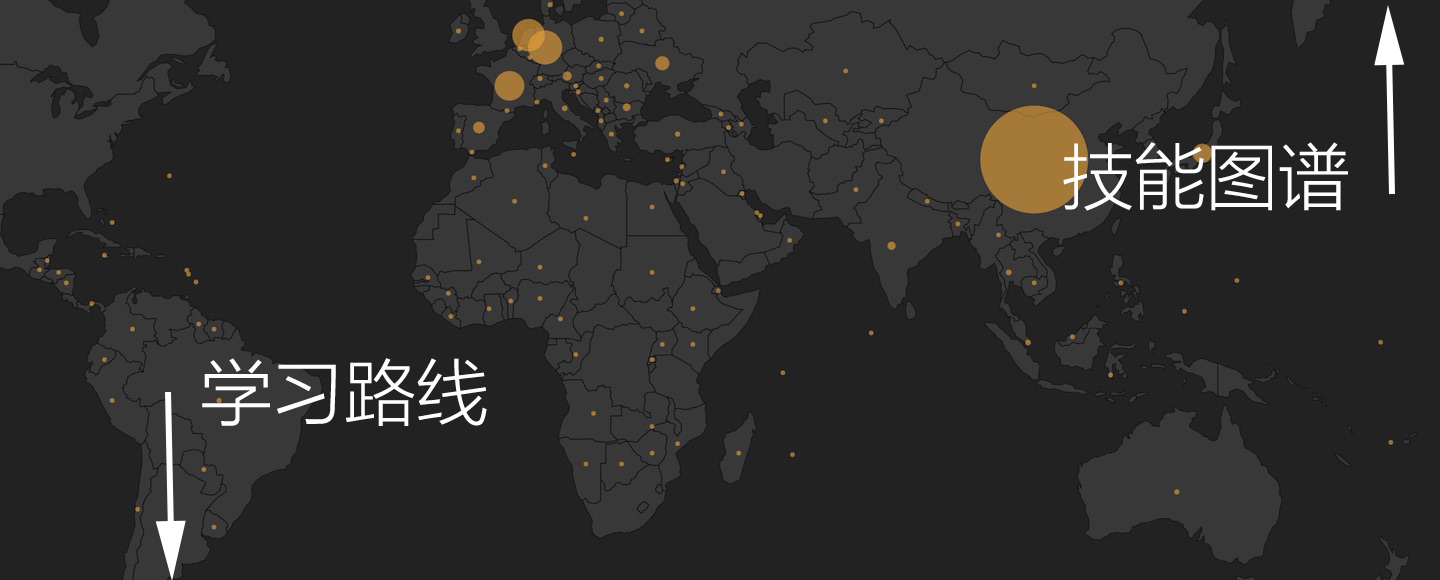
<style>
.page{position:relative;width:1440px;height:580px;background:#222222}
.page>*{position:absolute;margin:0}
.t1{font:72px "FZLTXHK--GBK1-0";color:#fefefe;text-transform:uppercase}
</style>
<div class="page">
<p class="t1" style="left:1063px;top:142px;width:285px;height:69px">技能图谱</p>
<p class="t1" style="left:202px;top:358px;width:285px;height:68px">学习路线</p>
</div>
